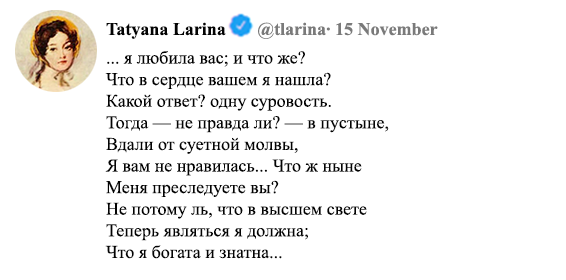
<style>
.page{position:relative;width:566px;height:280px;background:#ffffff}
.page>*{position:absolute;margin:0}
.t1{font:18px "TimesNewRomanPS-BoldMT";color:#7a7a7a}
.t2{font:18px "TimesNewRomanPS-BoldMT";color:#030303}
.t3{font:18px "TimesNewRomanPSMT";color:#030303}
</style>
<div class="page">
<p class="t1" style="left:106px;top:22px;width:332px;height:17px"><span class="t2">Tatyana Larina       </span>@tlarina∙ 15 November</p>
<p class="t3" style="left:105px;top:51px;width:284px;height:208px">... я любила вас; и что же?<br>Что в сердце вашем я нашла?<br>Какой ответ? одну суровость.<br>Тогда — не правда ли? — в пустыне,<br>Вдали от суетной молвы,<br>Я вам не нравилась... Что ж ныне<br>Меня преследуете вы?<br>Не потому ль, что в высшем свете<br>Теперь являться я должна;<br>Что я богата и знатна...</p>
</div>
